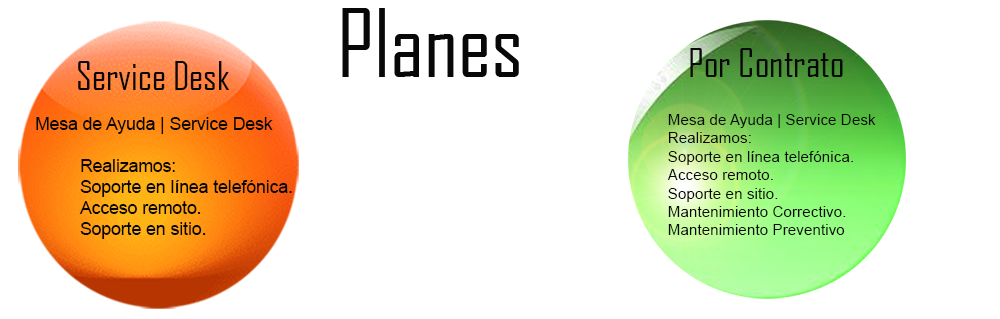
<style>
.page{position:relative;width:1000px;height:319px;background:#ffffff}
.page>*{position:absolute;margin:0}
.t1{font:90.1px "AgencyFB-Reg";color:#080808}
.t2{font:38.3px "AgencyFB-Reg";color:#080808}
.t3{font:37.5px "AgencyFB-Reg";color:#080808}
.t4{font:17.5px "ArialMT";color:#080808}
.t5{font:15.3px "ArialMT";color:#080808}
</style>
<div class="page">
<p class="t1" style="left:342px;top:8px;width:177px;height:69px">Planes</p>
<p class="t2" style="left:690px;top:48px;width:153px;height:29px">Por Contrato</p>
<p class="t3" style="left:78px;top:61px;width:151px;height:29px">Service Desk</p>
<p class="t4" style="left:36px;top:117px;width:256px;height:122px">Mesa de Ayuda | Service Desk<br><br> Realizamos:<br> Soporte en línea telefónica.<br> Acceso remoto.<br> Soporte en sitio.</p>
<p class="t5" style="left:667px;top:114px;width:209px;height:121px">Mesa de Ayuda | Service Desk<br>Realizamos:<br>Soporte en línea telefónica.<br>Acceso remoto.<br>Soporte en sitio.<br>Mantenimiento Correctivo.<br>Mantenimiento Preventivo</p>
</div>
